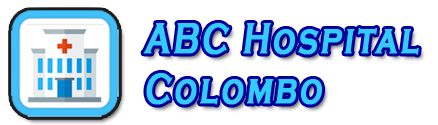
<style>
.page{position:relative;width:438px;height:125px;background:#ffffff}
.page>*{position:absolute;margin:0}
.t1{font:43.7px/50px "CopperplateGothic-Bold";letter-spacing:0.075em;color:#33ccff;font-weight:bold;font-style:italic;scale:0.72 1}
</style>
<div class="page">
<p class="t1" style="left:143px;top:23px;width:276px;height:82px">ABC Hospital<br>Colombo</p>
</div>
